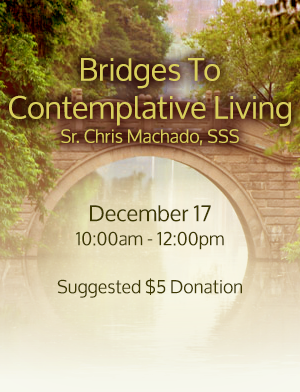
<style>
.page{position:relative;width:300px;height:392px}
.page>*{position:absolute;margin:0}
.t1{font:31px/38px "Oxygen";color:#d9cf5c}
.t2{font:18px/24px "Oxygen";color:#d9cf5c}
.t3{font:18px/24px "Oxygen";color:#3e3902}
.t4{font:22px/24px "Oxygen";color:#3e3902}
</style>
<div class="page">
<p class="t1" style="left:9px;top:58px;width:282px;height:88px;text-align:center">Bridges To Contemplative Living<br><span class="t2">Sr. Chris Machado, SSS</span></p>
<p class="t3" style="left:57px;top:205px;width:185px;height:93px;text-align:center"><span class="t4">December 17<br></span>10:00am - 12:00pm<br><br>Suggested $5 Donation</p>
</div>
